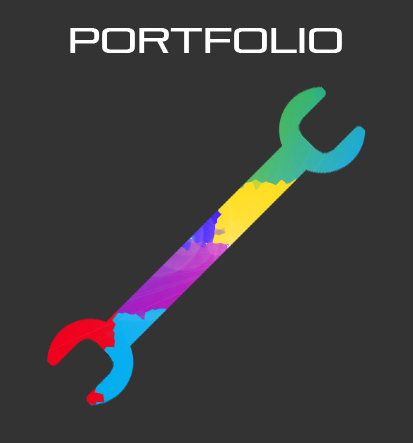
<style>
.page{position:relative;width:413px;height:443px;background:#333333}
.page>*{position:absolute;margin:0}
.t1{font:36px "PirulenRg-Regular";color:#ffffff}
</style>
<div class="page">
<p class="t1" style="left:70px;top:28px;width:272px;height:25px">Portfolio</p>
</div>
